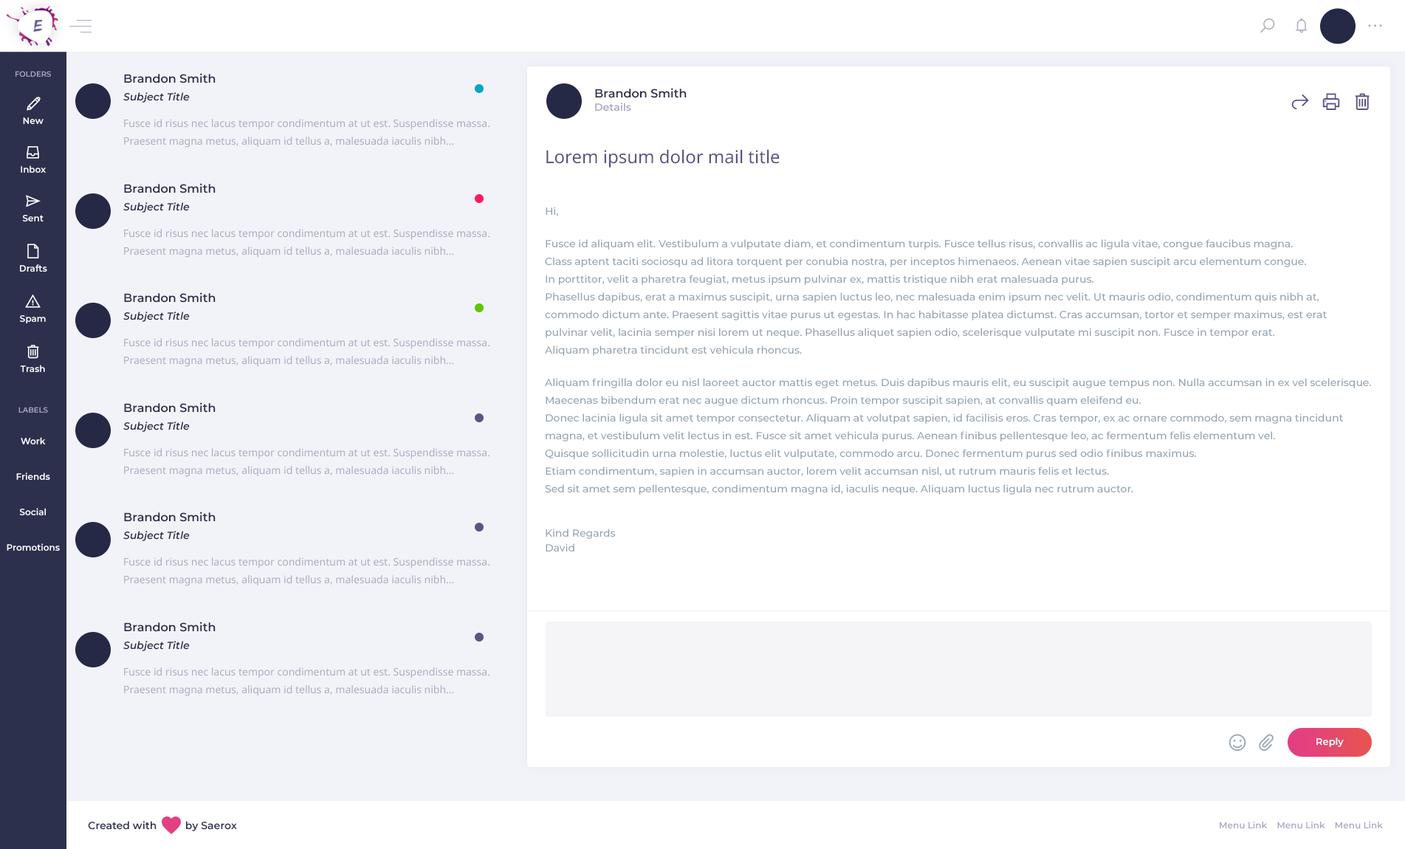
<style>
.page{position:relative;width:1405px;height:849px;background:#ffffff}
.page>*{position:absolute;margin:0}
.t1{font:7.4px "Montserrat-SemiBold";color:#aea9c3;text-transform:uppercase}
.t2{font:10.3px/26.6px "NotoSans-Regular";color:#aea9c3}
.t3{font:11.8px/17.7px "Montserrat-SemiBold";color:#2c304d}
.t4{font:10.3px/17.7px "Montserrat-SemiBoldItalic";color:#2c304d}
.t5{font:10.3px/17.7px "NotoSans-Regular";color:#aea9c3}
.t6{font:11.8px/13.3px "Montserrat-SemiBold";color:#2c304d}
.t7{font:10.3px/13.3px "Montserrat-SemiBold";color:#aea9c3}
.t8{font:8.9px "Montserrat-SemiBold";color:#ffffff}
.t9{font:17.7px "NotoSans-Regular";color:#5d5386}
.t10{font:10.3px/17.7px "Montserrat-Medium";color:#94a4b0}
.t11{font:10.3px/14.8px "Montserrat-Medium";color:#94a4b0}
.t12{font:8.9px/35.4px "Montserrat-SemiBold";color:#ffffff}
.t13{font:9.6px "Montserrat-SemiBold";color:#ffffff}
.t14{font:10.3px "Montserrat-SemiBold";color:#2c304d}
.t15{font:8.9px "Montserrat-SemiBold";color:#aea9c3}
</style>
<div class="page">
<p class="t1" style="left:16px;top:71px;width:35px;height:6px">folders</p>
<p class="t2" style="left:123px;top:73px;width:366px;height:75px"><span class="t3">Brandon Smith </span><span class="t4"><br>Subject Title<br></span>Fusce id risus nec lacus tempor condimentum at ut est. Suspendisse massa. <br><span class="t5">Praesent magna metus, aliquam id tellus a, malesuada iaculis nibh...</span></p>
<p class="t6" style="left:595px;top:88px;width:91px;height:23px">Brandon Smith <br><span class="t7">Details</span></p>
<p class="t8" style="left:23px;top:117px;width:21px;height:7px">New</p>
<p class="t9" style="left:546px;top:149px;width:233px;height:19px">Lorem ipsum dolor mail title</p>
<p class="t8" style="left:21px;top:165px;width:25px;height:8px">Inbox</p>
<p class="t2" style="left:123px;top:183px;width:366px;height:75px"><span class="t3">Brandon Smith </span><span class="t4"><br>Subject Title<br></span>Fusce id risus nec lacus tempor condimentum at ut est. Suspendisse massa. <br><span class="t5">Praesent magna metus, aliquam id tellus a, malesuada iaculis nibh...</span></p>
<p class="t10" style="left:545px;top:207px;width:826px;height:344px"><span class="t11">Hi,<br><br></span>Fusce id aliquam elit. Vestibulum a vulputate diam, et condimentum turpis. Fusce tellus risus, convallis ac ligula vitae, congue faucibus magna. <br>Class aptent taciti sociosqu ad litora torquent per conubia nostra, per inceptos himenaeos. Aenean vitae sapien suscipit arcu elementum congue. <br>In porttitor, velit a pharetra feugiat, metus ipsum pulvinar ex, mattis tristique nibh erat malesuada purus. <br>Phasellus dapibus, erat a maximus suscipit, urna sapien luctus leo, nec malesuada enim ipsum nec velit. Ut mauris odio, condimentum quis nibh at, <br>commodo dictum ante. Praesent sagittis vitae purus ut egestas. In hac habitasse platea dictumst. Cras accumsan, tortor et semper maximus, est erat <br>pulvinar velit, lacinia semper nisi lorem ut neque. Phasellus aliquet sapien odio, scelerisque vulputate mi suscipit non. Fusce in tempor erat. <br>Aliquam pharetra tincidunt est vehicula rhoncus. <br><br>Aliquam fringilla dolor eu nisl laoreet auctor mattis eget metus. Duis dapibus mauris elit, eu suscipit augue tempus non. Nulla accumsan in ex vel scelerisque. <br>Maecenas bibendum erat nec augue dictum rhoncus. Proin tempor suscipit sapien, at convallis quam eleifend eu. <br>Donec lacinia ligula sit amet tempor consectetur. Aliquam at volutpat sapien, id facilisis eros. Cras tempor, ex ac ornare commodo, sem magna tincidunt <br>magna, et vestibulum velit lectus in est. Fusce sit amet vehicula purus. Aenean finibus pellentesque leo, ac fermentum felis elementum vel. <br>Quisque sollicitudin urna molestie, luctus elit vulputate, commodo arcu. Donec fermentum purus sed odio finibus maximus. <br>Etiam condimentum, sapien in accumsan auctor, lorem velit accumsan nisl, ut rutrum mauris felis et lectus. <br>Sed sit amet sem pellentesque, condimentum magna id, iaculis neque. Aliquam luctus ligula nec rutrum auctor.<br><span class="t11"><br><br>Kind Regards<br>David</span></p>
<p class="t8" style="left:22px;top:215px;width:22px;height:6px">Sent</p>
<p class="t8" style="left:20px;top:264px;width:27px;height:8px">Drafts</p>
<p class="t2" style="left:123px;top:292px;width:366px;height:75px"><span class="t3">Brandon Smith </span><span class="t4"><br>Subject Title<br></span>Fusce id risus nec lacus tempor condimentum at ut est. Suspendisse massa. <br><span class="t5">Praesent magna metus, aliquam id tellus a, malesuada iaculis nibh...</span></p>
<p class="t8" style="left:20px;top:315px;width:26px;height:8px">Spam</p>
<p class="t8" style="left:20px;top:365px;width:25px;height:7px">Trash</p>
<p class="t1" style="left:18px;top:407px;width:30px;height:6px">labels</p>
<p class="t2" style="left:123px;top:402px;width:366px;height:75px"><span class="t3">Brandon Smith </span><span class="t4"><br>Subject Title<br></span>Fusce id risus nec lacus tempor condimentum at ut est. Suspendisse massa. <br><span class="t5">Praesent magna metus, aliquam id tellus a, malesuada iaculis nibh...</span></p>
<p class="t12" style="left:7px;top:437px;width:53px;height:114px;text-align:center">Work<br>Friends<br>Social<br>Promotions</p>
<p class="t2" style="left:123px;top:512px;width:366px;height:74px"><span class="t3">Brandon Smith </span><span class="t4"><br>Subject Title<br></span>Fusce id risus nec lacus tempor condimentum at ut est. Suspendisse massa. <br><span class="t5">Praesent magna metus, aliquam id tellus a, malesuada iaculis nibh...</span></p>
<p class="t2" style="left:123px;top:622px;width:366px;height:74px"><span class="t3">Brandon Smith </span><span class="t4"><br>Subject Title<br></span>Fusce id risus nec lacus tempor condimentum at ut est. Suspendisse massa. <br><span class="t5">Praesent magna metus, aliquam id tellus a, malesuada iaculis nibh...</span></p>
<p class="t13" style="left:1316px;top:737px;width:27px;height:10px">Reply</p>
<p class="t14" style="left:88px;top:821px;width:149px;height:10px">Created with          by Saerox</p>
<p class="t15" style="left:1219px;top:821px;width:164px;height:8px">Menu Link    Menu Link    Menu Link</p>
</div>
